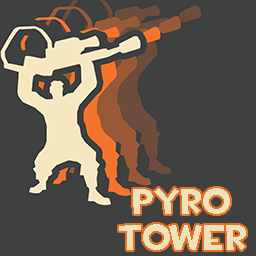
<style>
.page{position:relative;width:256px;height:256px;background:#3f4040}
.page>*{position:absolute;margin:0}
.t1{font:36px/36px "TF2Build";color:#ede3bb}
</style>
<div class="page">
<p class="t1" style="left:119px;top:188px;width:127px;height:62px;text-align:center">PYRO<br>Tower</p>
</div>
